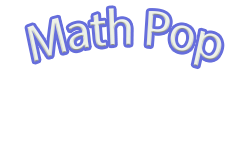
<style>
.page{position:relative;width:250px;height:150px;background:#ffffff}
.page>*{position:absolute;margin:0}
.t1{font:51.8px "MyriadPro-Regular";color:#edf1e6;scale:0.86 1}
</style>
<div class="page">
<p class="t1" style="left:27px;top:8px;width:195px;height:59px">Math Pop</p>
</div>
